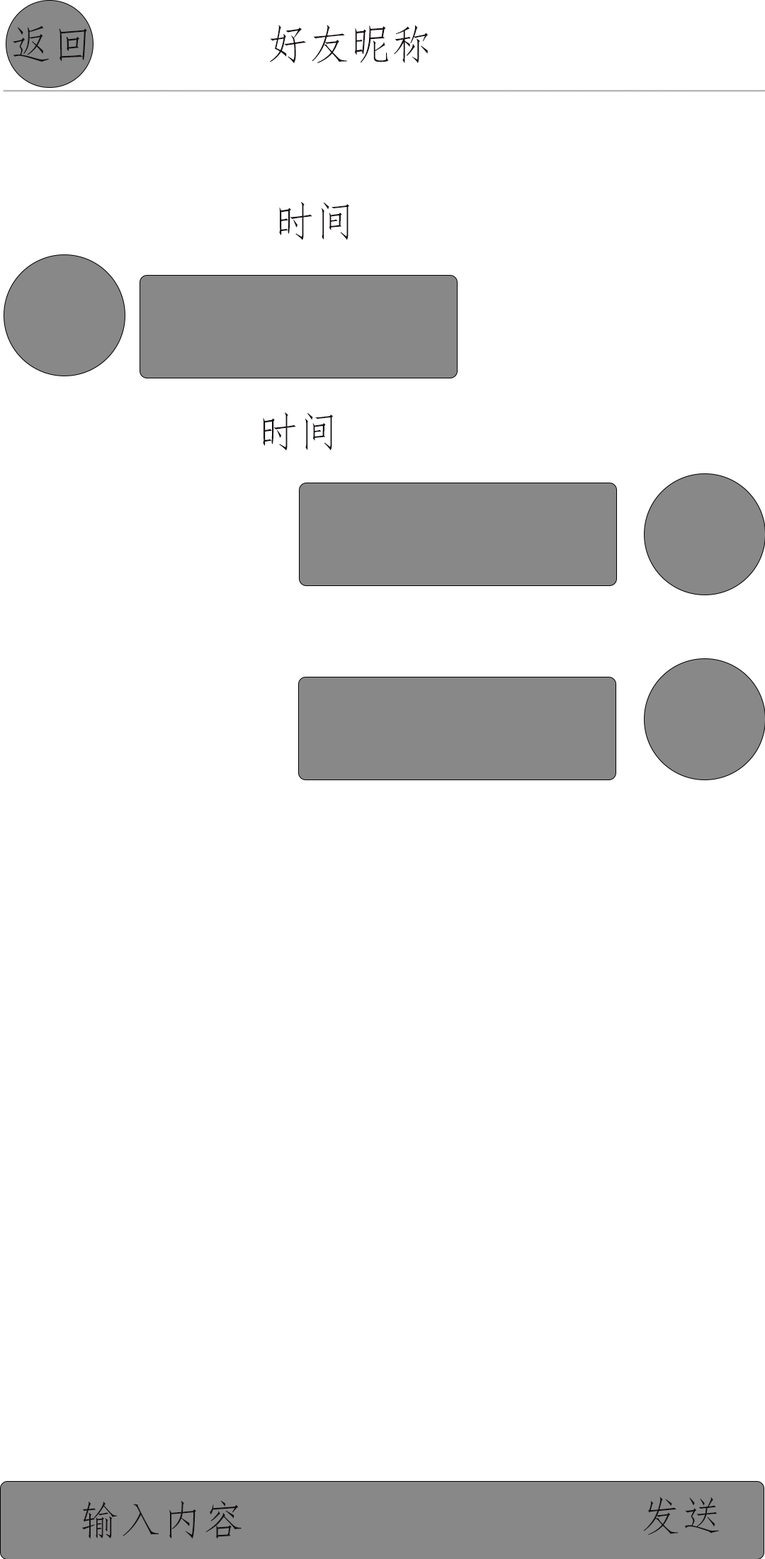
<style>
.page{position:relative;width:765px;height:1559px;background:#ffffff}
.page>*{position:absolute;margin:0}
.t1{font:41.3px "FangSong";color:#151010}
</style>
<div class="page">
<p class="t1" style="left:13px;top:26px;width:74px;height:36px">返回</p>
<p class="t1" style="left:270px;top:25px;width:158px;height:39px">好友昵称</p>
<p class="t1" style="left:279px;top:202px;width:70px;height:38px">时间</p>
<p class="t1" style="left:263px;top:412px;width:70px;height:39px">时间</p>
<p class="t1" style="left:81px;top:1500px;width:161px;height:39px">输入内容</p>
<p class="t1" style="left:643px;top:1496px;width:76px;height:38px">发送</p>
</div>
